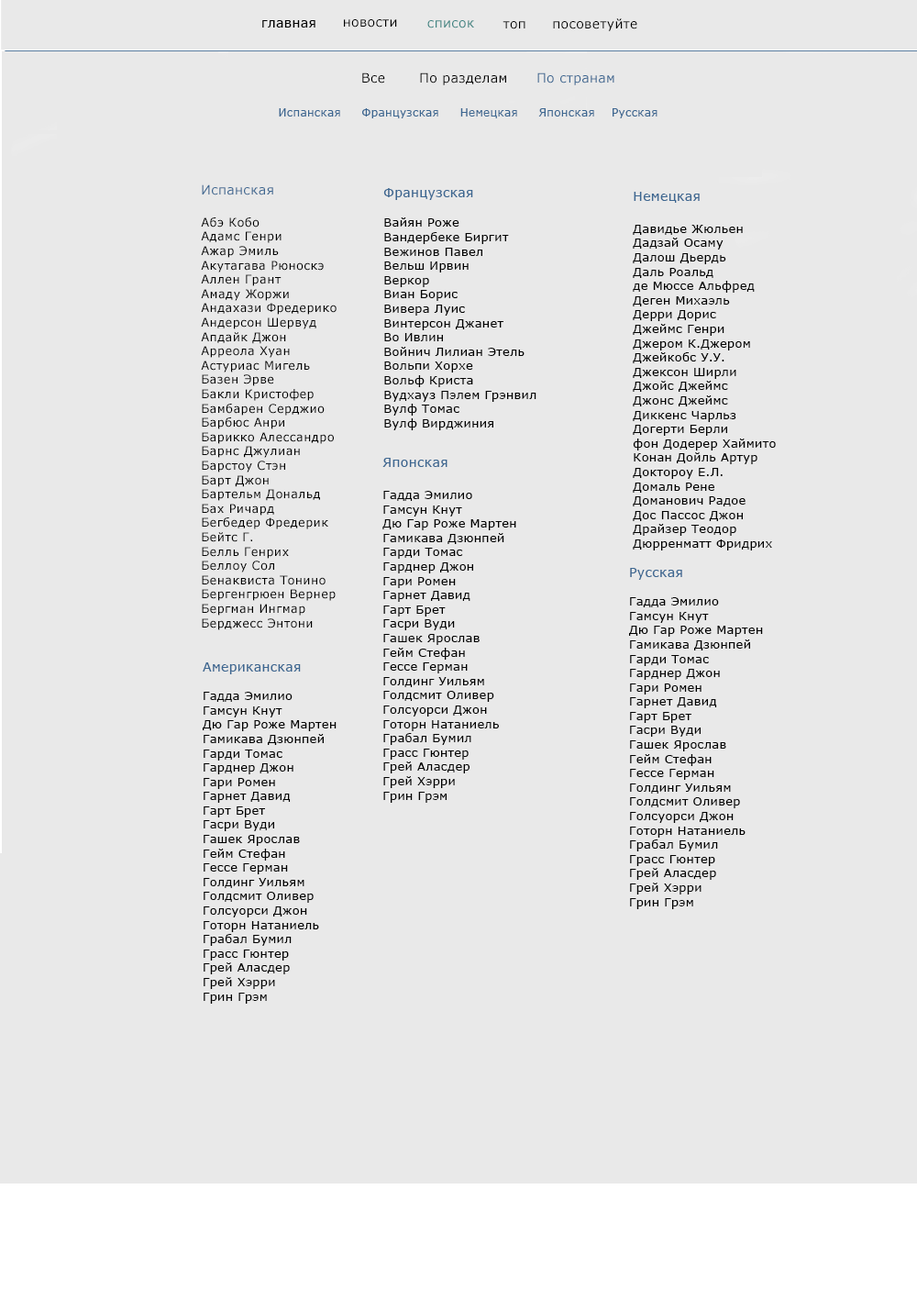
<style>
.page{position:relative;width:917px;height:1300px;background:#e9e9e9}
.page>*{position:absolute;margin:0}
.t1{font:12.8px "MSReferenceSansSerif";letter-spacing:0.025em;color:#000000}
.t2{font:12.8px "MSReferenceSansSerif";letter-spacing:0.025em;color:#3e8482}
.t3{font:12.8px "MSReferenceSansSerif";letter-spacing:0.025em;color:#3d6791}
.t4{font:11px "MSReferenceSansSerif";letter-spacing:0.025em;color:#3d6791}
.t5{font:11.9px "MSReferenceSansSerif";letter-spacing:0.025em;color:#000000}
</style>
<div class="page">
<p class="t1" style="left:262px;top:20px;width:54px;height:8px">главная</p>
<p class="t1" style="left:344px;top:19px;width:53px;height:9px">новости</p>
<p class="t2" style="left:427px;top:20px;width:47px;height:8px">список</p>
<p class="t1" style="left:503px;top:21px;width:23px;height:8px">топ</p>
<p class="t1" style="left:553px;top:18px;width:85px;height:13px">посоветуйте</p>
<p class="t1" style="left:362px;top:72px;width:253px;height:13px">Все       По разделам      <span class="t3">По странам</span></p>
<p class="t4" style="left:279px;top:108px;width:379px;height:10px">Испанская     Французская     Немецкая     Японская    Русская</p>
<p class="t5" style="left:201px;top:184px;width:136px;height:446px"><span class="t3">Испанская <br><br></span>Абэ Кобо<br>Адамс Генри<br>Ажар Эмиль<br>Акутагава Рюноскэ<br>Аллен Грант<br>Амаду Жоржи<br>Андахази Фредерико<br>Андерсон Шервуд<br>Апдайк Джон<br>Арреола Хуан<br>Астуриас Мигель<br>Базен Эрве<br>Бакли Кристофер<br>Бамбарен Серджио<br>Барбюс Анри<br>Барикко Алессандро<br>Барнс Джулиан<br>Барстоу Стэн<br>Барт Джон<br>Бартельм Дональд<br>Бах Ричард<br>Бегбедер Фредерик<br>Бейтс Г.<br>Белль Генрих<br>Беллоу Сол<br>Бенаквиста Тонино<br>Бергенгрюен Вернер<br>Бергман Ингмар<br>Берджесс Энтони</p>
<p class="t5" style="left:383px;top:188px;width:154px;height:242px"><span class="t3">Французская<br><br></span>Вайян Роже<br>Вандербеке Биргит<br>Вежинов Павел<br>Вельш Ирвин<br>Веркор<br>Виан Борис<br>Вивера Луис<br>Винтерсон Джанет<br>Во Ивлин<br>Войнич Лилиан Этель<br>Вольпи Хорхе<br>Вольф Криста<br>Вудхауз Пэлем Грэнвил<br>Вулф Томас<br>Вулф Вирджиния</p>
<p class="t5" style="left:633px;top:192px;width:143px;height:358px"><span class="t3">Немецкая<br><br></span>Давидье Жюльен<br>Дадзай Осаму<br>Далош Дьердь<br>Даль Роальд<br>де Мюссе Альфред<br>Деген Михаэль<br>Дерри Дорис<br>Джеймс Генри<br>Джером К.Джером<br>Джейкобс У.У.<br>Джексон Ширли<br>Джойс Джеймс<br>Джонс Джеймс<br>Диккенс Чарльз<br>Догерти Берли<br>фон Додерер Хаймито<br>Конан Дойль Артур<br>Доктороу Е.Л.<br>Домаль Рене<br>Доманович Радое<br>Дос Пассос Джон<br>Драйзер Теодор<br>Дюрренматт Фридрих</p>
<p class="t5" style="left:383px;top:458px;width:133px;height:345px"><span class="t3">Японская<br> <br></span>Гадда Эмилио<br>Гамсун Кнут<br>Дю Гар Роже Мартен<br>Гамикава Дзюнпей<br>Гарди Томас<br>Гарднер Джон<br>Гари Ромен<br>Гарнет Давид<br>Гарт Брет<br>Гасри Вуди<br>Гашек Ярослав<br>Гейм Стефан<br>Гессе Герман<br>Голдинг Уильям<br>Голдсмит Оливер<br>Голсуорси Джон<br>Готорн Натаниель<br>Грабал Бумил<br>Грасс Гюнтер<br>Грей Аласдер<br>Грей Хэрри<br>Грин Грэм</p>
<p class="t5" style="left:629px;top:568px;width:134px;height:341px"><span class="t3">Русская<br><br></span>Гадда Эмилио<br>Гамсун Кнут<br>Дю Гар Роже Мартен<br>Гамикава Дзюнпей<br>Гарди Томас<br>Гарднер Джон<br>Гари Ромен<br>Гарнет Давид<br>Гарт Брет<br>Гасри Вуди<br>Гашек Ярослав<br>Гейм Стефан<br>Гессе Герман<br>Голдинг Уильям<br>Голдсмит Оливер<br>Голсуорси Джон<br>Готорн Натаниель<br>Грабал Бумил<br>Грасс Гюнтер<br>Грей Аласдер<br>Грей Хэрри<br>Грин Грэм</p>
<p class="t5" style="left:203px;top:662px;width:134px;height:342px"><span class="t3">Американская<br><br></span>Гадда Эмилио<br>Гамсун Кнут<br>Дю Гар Роже Мартен<br>Гамикава Дзюнпей<br>Гарди Томас<br>Гарднер Джон<br>Гари Ромен<br>Гарнет Давид<br>Гарт Брет<br>Гасри Вуди<br>Гашек Ярослав<br>Гейм Стефан<br>Гессе Герман<br>Голдинг Уильям<br>Голдсмит Оливер<br>Голсуорси Джон<br>Готорн Натаниель<br>Грабал Бумил<br>Грасс Гюнтер<br>Грей Аласдер<br>Грей Хэрри<br>Грин Грэм</p>
</div>
